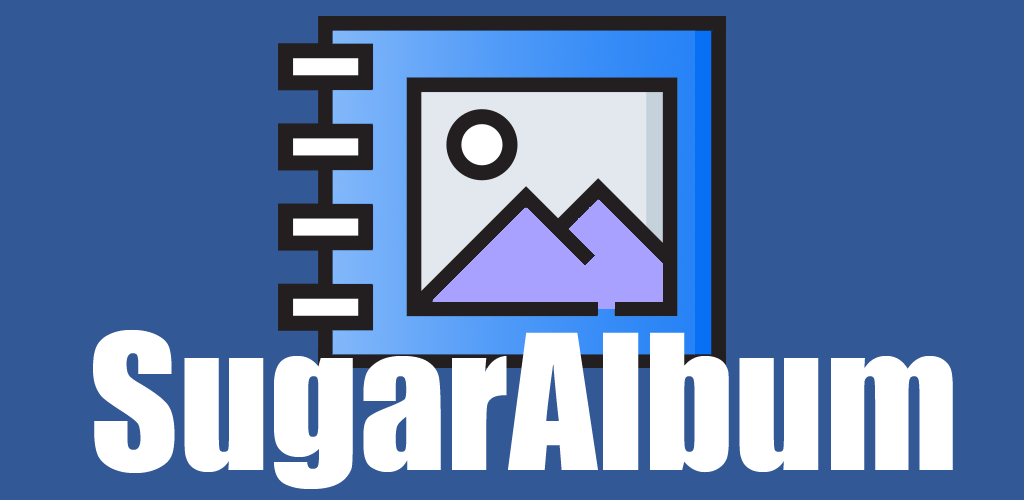
<style>
.page{position:relative;width:1024px;height:500px;background:#325896}
.page>*{position:absolute;margin:0}
.t1{font:173.4px "Impact";color:#ffffff}
</style>
<div class="page">
<p class="t1" style="left:93px;top:329px;width:860px;height:160px">SugarAlbum</p>
</div>
